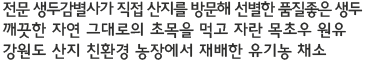
<style>
.page{position:relative;width:366px;height:61px;background:#ffffff}
.page>*{position:absolute;margin:0}
.t1{font:17px/21px "HaanYGodic23";letter-spacing:-0.04em;color:#2f2f2e}
.t2{font:17px/21px "HaanYGodic23";letter-spacing:-0.12em;color:#2f2f2e}
</style>
<div class="page">
<p class="t1" style="left:2px;top:1px;width:361px;height:59px"><span class="t2">전문 생두감별사가 직접 산지를 방문해 선별한 품질좋은 생두<br></span>깨끗한 자연 그대로의 초목을 먹고 자란 목초우 원유<br>강원도 산지 친환경 농장에서 재배한 유기농 채소</p>
</div>
